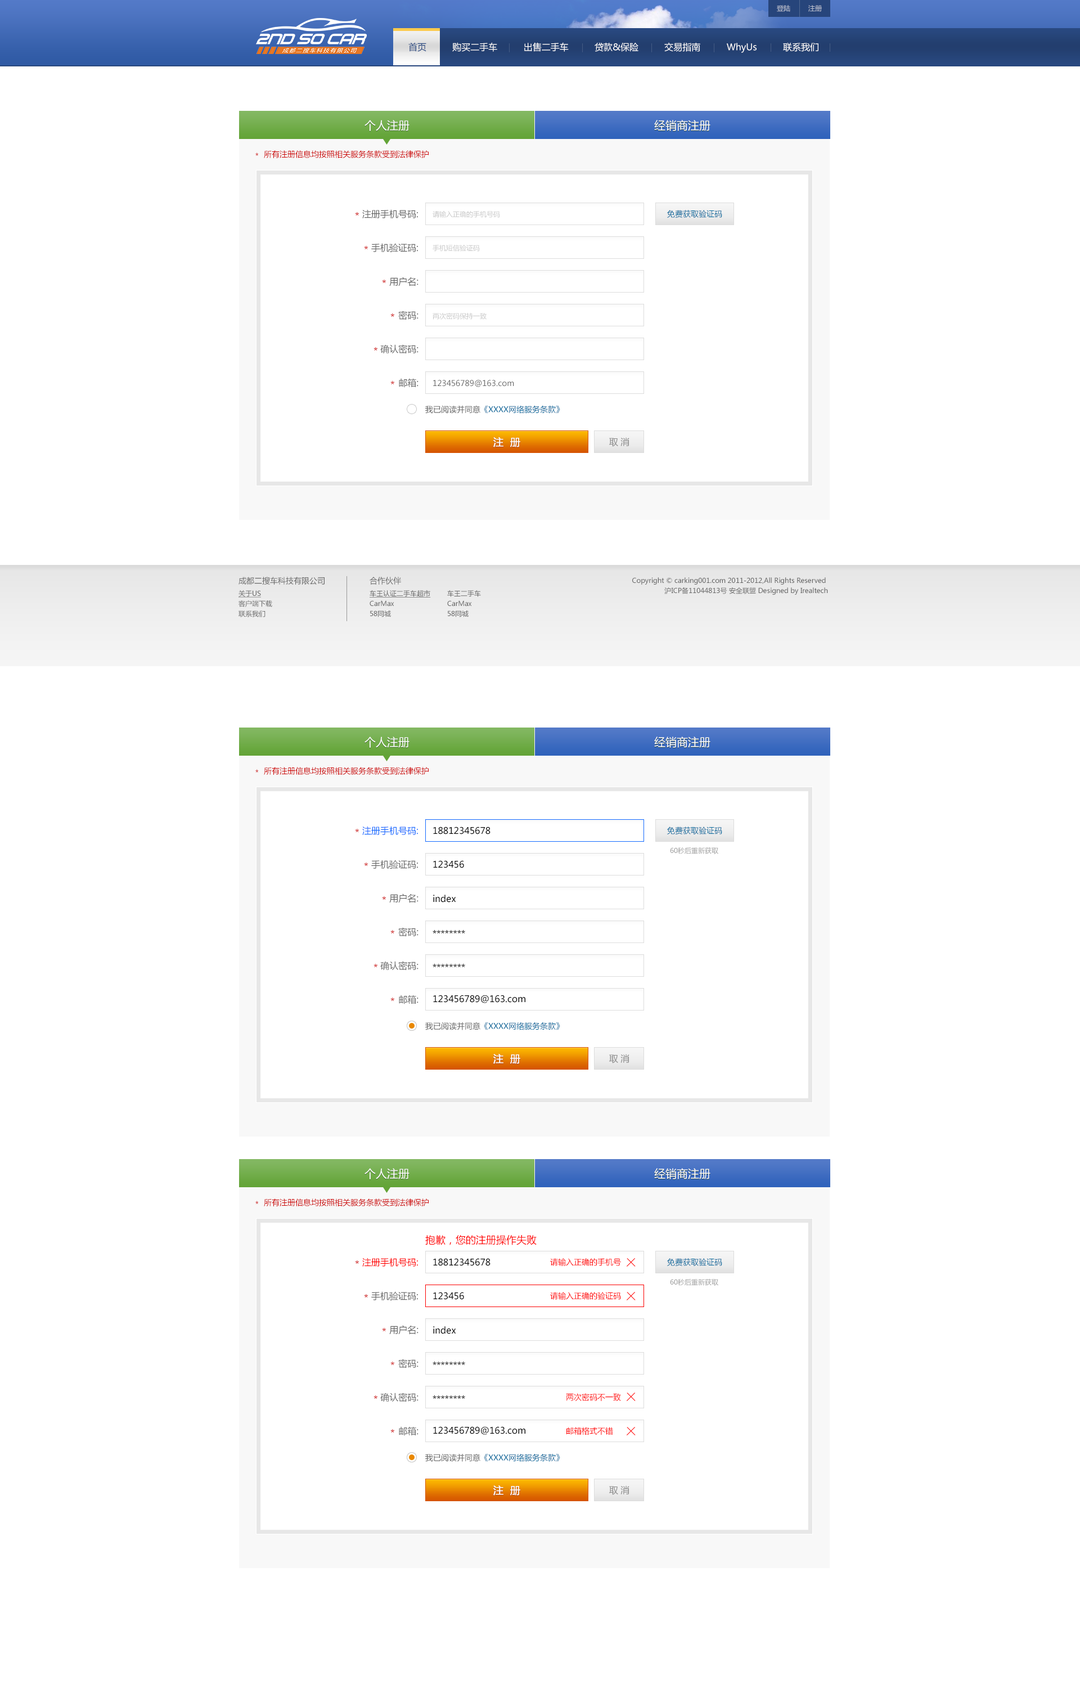
<style>
.page{position:relative;width:1080px;height:1688px;background:#ffffff}
.page>*{position:absolute;margin:0}
.t1{font:6.8px "MicrosoftYaHei";color:#bdc3d1}
.t2{font:9px "MicrosoftYaHei";color:#fffefe}
.t3{font:9px "MicrosoftYaHei";color:#294981}
.t4{font:9px "MicrosoftYaHei";color:#f8f8f8}
.t5{font:11.2px "MicrosoftYaHei";color:#ffffff;text-transform:uppercase}
.t6{font:7.9px "MicrosoftYaHei";text-transform:uppercase}
.t7{font:7.9px "MicrosoftYaHei";color:#cc0000;text-transform:uppercase}
.t8{font:9px "MicrosoftYaHei";color:#666666;text-transform:uppercase}
.t9{font:7.9px "MicrosoftYaHei";color:#04699c}
.t10{font:9px "MicrosoftYaHei";text-transform:uppercase}
.t11{font:6.8px "MicrosoftYaHei";color:#c8c8c8}
.t12{font:7.9px "MicrosoftYaHei";color:#666666}
.t13{font:10.1px "MicrosoftYaHei";color:#ffffff;text-transform:uppercase;font-weight:bold}
.t14{font:9px "MicrosoftYaHei";color:#888888;text-transform:uppercase}
.t15{font:6.8px/10.1px "MicrosoftYaHei";color:#666666}
.t16{font:7.9px/13.5px "MicrosoftYaHei";color:#666666}
.t17{font:6.8px/10.1px "MicrosoftYaHei";color:#666666;text-decoration:underline}
.t18{font:9px "MicrosoftYaHei";color:#156bff;text-transform:uppercase}
.t19{font:9px "MicrosoftYaHei";color:#000000}
.t20{font:6.8px "MicrosoftYaHei";color:#9e9e9e}
.t21{font:10.1px "MicrosoftYaHei";color:#ff0000}
.t22{font:9px "MicrosoftYaHei";color:#ff0000;text-transform:uppercase}
.t23{font:7.9px "MicrosoftYaHei";color:#ff0000}
</style>
<div class="page">
<p class="t1" style="left:777px;top:5px;width:45px;height:7px">登陆         注册</p>
<p class="t2" style="left:408px;top:42px;width:410px;height:11px"><span class="t3">首页 </span><span class="t4">购买二手车 </span>出售二手车 贷款&amp;保险 交易指南 WhyUs 联系我们</p>
<p class="t5" style="left:364px;top:120px;width:46px;height:11px">个人注册</p>
<p class="t5" style="left:654px;top:120px;width:56px;height:11px">经销商注册</p>
<p class="t6" style="left:255px;top:152px;width:4px;height:4px">*</p>
<p class="t7" style="left:264px;top:150px;width:165px;height:8px">所有注册信息均按照相关服务条款受到法律保护</p>
<p class="t8" style="left:362px;top:209px;width:56px;height:10px">注册手机号码:</p>
<p class="t9" style="left:667px;top:210px;width:55px;height:8px">免费获取验证码</p>
<p class="t10" style="left:355px;top:212px;width:4px;height:3px">*</p>
<p class="t11" style="left:433px;top:211px;width:67px;height:7px">请输入正确的手机号码</p>
<p class="t10" style="left:364px;top:246px;width:4px;height:3px">*</p>
<p class="t8" style="left:371px;top:243px;width:47px;height:10px">手机验证码:</p>
<p class="t11" style="left:433px;top:245px;width:47px;height:6px">手机短信验证码</p>
<p class="t10" style="left:382px;top:280px;width:4px;height:3px">*</p>
<p class="t8" style="left:389px;top:277px;width:29px;height:9px">用户名:</p>
<p class="t10" style="left:390px;top:313px;width:4px;height:4px">*</p>
<p class="t8" style="left:398px;top:310px;width:20px;height:10px">密码:</p>
<p class="t11" style="left:433px;top:313px;width:54px;height:7px">两次密码保持一致</p>
<p class="t10" style="left:374px;top:347px;width:3px;height:3px">*</p>
<p class="t8" style="left:380px;top:344px;width:38px;height:10px">确认密码:</p>
<p class="t10" style="left:390px;top:381px;width:4px;height:3px">*</p>
<p class="t8" style="left:399px;top:378px;width:19px;height:10px">邮箱:</p>
<p class="t12" style="left:433px;top:380px;width:81px;height:7px">123456789@163.com</p>
<p class="t9" style="left:425px;top:405px;width:135px;height:8px"><span class="t12">我已阅读并同意</span>《XXXX网络服务条款》</p>
<p class="t13" style="left:493px;top:437px;width:27px;height:10px">注  册</p>
<p class="t14" style="left:609px;top:437px;width:20px;height:10px">取 消</p>
<p class="t12" style="left:238px;top:577px;width:87px;height:7px">成都二搜车科技有限公司</p>
<p class="t15" style="left:370px;top:577px;width:61px;height:40px"><span class="t16">合作伙伴<br></span><span class="t17">车王认证二手车超市<br></span>CarMax<br>58同城</p>
<p class="t15" style="left:632px;top:577px;width:196px;height:18px;text-align:right">Copyright © carking001.com 2011-2012,All Rights Reserved <br>沪ICP备11044813号 安全联盟 Designed by Irealtech</p>
<p class="t15" style="left:238px;top:590px;width:34px;height:27px"><span class="t17">关于US<br></span>客户端下载<br>联系我们</p>
<p class="t15" style="left:447px;top:590px;width:34px;height:27px">车王二手车<br>CarMax<br>58同城</p>
<p class="t5" style="left:364px;top:736px;width:46px;height:12px">个人注册</p>
<p class="t5" style="left:654px;top:736px;width:56px;height:12px">经销商注册</p>
<p class="t6" style="left:255px;top:769px;width:4px;height:3px">*</p>
<p class="t7" style="left:264px;top:767px;width:165px;height:8px">所有注册信息均按照相关服务条款受到法律保护</p>
<p class="t10" style="left:355px;top:829px;width:4px;height:3px">*</p>
<p class="t18" style="left:362px;top:826px;width:56px;height:9px">注册手机号码:</p>
<p class="t19" style="left:433px;top:826px;width:57px;height:8px">18812345678</p>
<p class="t9" style="left:667px;top:826px;width:55px;height:8px">免费获取验证码</p>
<p class="t20" style="left:670px;top:847px;width:48px;height:7px">60秒后重新获取</p>
<p class="t10" style="left:364px;top:862px;width:4px;height:4px">*</p>
<p class="t8" style="left:371px;top:860px;width:47px;height:9px">手机验证码:</p>
<p class="t19" style="left:433px;top:860px;width:31px;height:8px">123456</p>
<p class="t8" style="left:389px;top:893px;width:29px;height:10px">用户名:</p>
<p class="t10" style="left:382px;top:896px;width:4px;height:3px">*</p>
<p class="t19" style="left:433px;top:894px;width:23px;height:8px">index</p>
<p class="t10" style="left:390px;top:930px;width:4px;height:3px">*</p>
<p class="t8" style="left:398px;top:927px;width:20px;height:9px">密码:</p>
<p class="t19" style="left:433px;top:930px;width:32px;height:3px">********</p>
<p class="t10" style="left:374px;top:964px;width:3px;height:3px">*</p>
<p class="t8" style="left:380px;top:961px;width:38px;height:9px">确认密码:</p>
<p class="t19" style="left:433px;top:964px;width:32px;height:3px">********</p>
<p class="t10" style="left:390px;top:997px;width:4px;height:4px">*</p>
<p class="t8" style="left:399px;top:994px;width:19px;height:10px">邮箱:</p>
<p class="t19" style="left:433px;top:994px;width:92px;height:9px">123456789@163.com</p>
<p class="t9" style="left:425px;top:1022px;width:135px;height:8px"><span class="t12">我已阅读并同意</span>《XXXX网络服务条款》</p>
<p class="t13" style="left:493px;top:1054px;width:27px;height:10px">注  册</p>
<p class="t14" style="left:609px;top:1054px;width:20px;height:9px">取 消</p>
<p class="t5" style="left:364px;top:1168px;width:46px;height:11px">个人注册</p>
<p class="t5" style="left:654px;top:1168px;width:56px;height:11px">经销商注册</p>
<p class="t6" style="left:255px;top:1200px;width:4px;height:4px">*</p>
<p class="t7" style="left:264px;top:1198px;width:165px;height:8px">所有注册信息均按照相关服务条款受到法律保护</p>
<p class="t21" style="left:425px;top:1235px;width:112px;height:10px">抱歉，您的注册操作失败</p>
<p class="t10" style="left:355px;top:1260px;width:4px;height:3px">*</p>
<p class="t22" style="left:362px;top:1257px;width:56px;height:10px">注册手机号码:</p>
<p class="t19" style="left:433px;top:1258px;width:57px;height:8px">18812345678</p>
<p class="t23" style="left:550px;top:1258px;width:71px;height:8px">请输入正确的手机号</p>
<p class="t9" style="left:667px;top:1258px;width:55px;height:8px">免费获取验证码</p>
<p class="t20" style="left:670px;top:1278px;width:48px;height:7px">60秒后重新获取</p>
<p class="t10" style="left:364px;top:1294px;width:4px;height:3px">*</p>
<p class="t8" style="left:371px;top:1291px;width:47px;height:9px">手机验证码:</p>
<p class="t19" style="left:433px;top:1292px;width:31px;height:7px">123456</p>
<p class="t23" style="left:550px;top:1292px;width:71px;height:7px">请输入正确的验证码</p>
<p class="t8" style="left:389px;top:1325px;width:29px;height:9px">用户名:</p>
<p class="t19" style="left:433px;top:1326px;width:23px;height:8px">index</p>
<p class="t10" style="left:382px;top:1328px;width:4px;height:3px">*</p>
<p class="t10" style="left:390px;top:1361px;width:4px;height:4px">*</p>
<p class="t8" style="left:398px;top:1358px;width:20px;height:9px">密码:</p>
<p class="t19" style="left:433px;top:1361px;width:32px;height:4px">********</p>
<p class="t10" style="left:374px;top:1395px;width:3px;height:3px">*</p>
<p class="t8" style="left:380px;top:1392px;width:38px;height:10px">确认密码:</p>
<p class="t19" style="left:433px;top:1395px;width:32px;height:3px">********</p>
<p class="t23" style="left:566px;top:1393px;width:55px;height:8px">两次密码不一致</p>
<p class="t10" style="left:390px;top:1429px;width:4px;height:3px">*</p>
<p class="t8" style="left:399px;top:1426px;width:19px;height:10px">邮箱:</p>
<p class="t19" style="left:433px;top:1426px;width:92px;height:8px">123456789@163.com</p>
<p class="t23" style="left:566px;top:1426px;width:47px;height:8px">邮箱格式不错</p>
<p class="t9" style="left:425px;top:1453px;width:135px;height:8px"><span class="t12">我已阅读并同意</span>《XXXX网络服务条款》</p>
<p class="t13" style="left:493px;top:1485px;width:27px;height:10px">注  册</p>
<p class="t14" style="left:609px;top:1485px;width:20px;height:10px">取 消</p>
</div>
